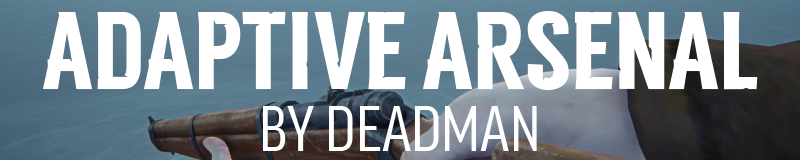
<style>
.page{position:relative;width:800px;height:160px;background:#ffffff}
.page>*{position:absolute;margin:0}
.t1{font:110px "TLD_Headline_One_Test1.5";color:#ffffff}
.t2{font:62px "FFGoodProCond-News";color:#ffffff}
</style>
<div class="page">
<p class="t1" style="left:42px;top:11px;width:716px;height:79px">ADAPTIVE ARSENAL</p>
<p class="t2" style="left:263px;top:106px;width:274px;height:45px">BY DEADMAN</p>
</div>
